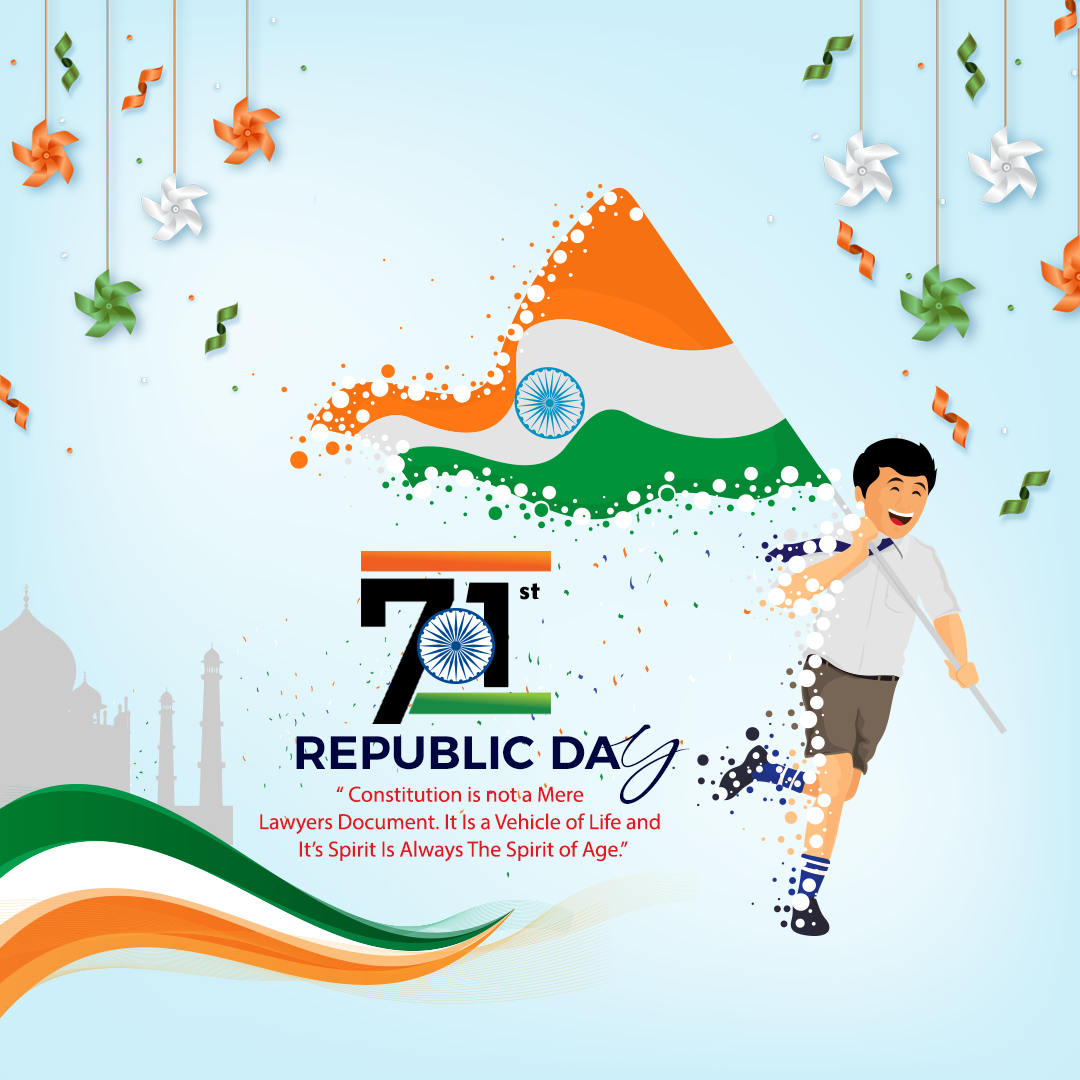
<style>
.page{position:relative;width:1080px;height:1080px}
.page>*{position:absolute;margin:0}
.t1{font:145.9px "Geometric415BT-BlackA";color:#000000;font-weight:bold}
.t2{font:25.4px "Geometric415BT-BlackA";color:#000000;font-weight:bold}
.t3{font:46.9px/46.9px "Montserrat-SemiBold";color:#000540;text-transform:uppercase}
.t4{font:25px/46.9px "GillSansMT-BoldItalic";color:#000000}
.t5{font:31.3px/46.9px "Signatrue";color:#000540;text-transform:uppercase}
.t6{font:21.9px/27.4px "MyriadPro-Regular";color:#e31921}
</style>
<div class="page">
<p class="t1" style="left:466px;top:582px;width:43px;height:106px">1</p>
<p class="t2" style="left:520px;top:583px;width:20px;height:17px">st</p>
<p class="t3" style="left:296px;top:724px;width:394px;height:80px"><span class="t4"><br></span>Republic Da<span class="t5">y</span></p>
<p class="t6" style="left:260px;top:786px;width:400px;height:76px;text-align:center">“ Constitution is not a Mere <br>Lawyers Document. It Is a Vehicle of Life and <br>It’s Spirit Is Always The Spirit of Age.”</p>
</div>
